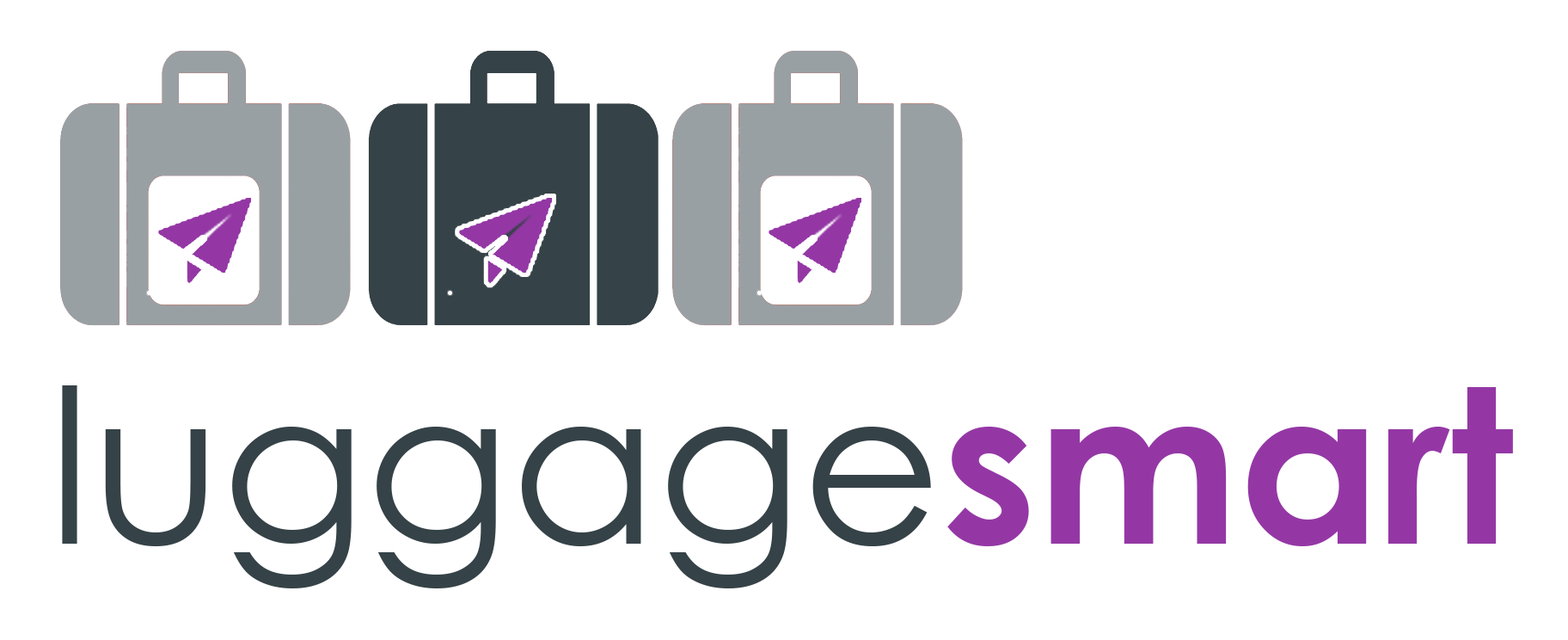
<style>
.page{position:relative;width:1568px;height:640px;background:#ffffff}
.page>*{position:absolute;margin:0}
.t1{font:214.9px "CenturyGothic";color:#354247}
.t2{font:214.9px "CenturyGothic-Bold";color:#9437a5}
</style>
<div class="page">
<p class="t1" style="left:62px;top:385px;width:1451px;height:203px">luggage<span class="t2">smart</span></p>
</div>
